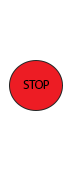
<style>
.page{position:relative;width:72px;height:177px;background:#ffffff}
.page>*{position:absolute;margin:0}
.t1{font:12px "MyriadPro-Regular";color:#000000}
</style>
<div class="page">
<p class="t1" style="left:23px;top:80px;width:26px;height:9px">STOP</p>
</div>
